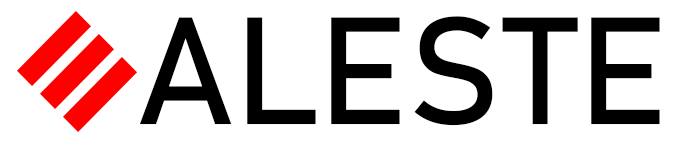
<style>
.page{position:relative;width:692px;height:149px;background:#ffffff}
.page>*{position:absolute;margin:0}
.t1{font:150px "Bahnschrift";color:#000000}
</style>
<div class="page">
<p class="t1" style="left:139px;top:16px;width:521px;height:110px">ALESTE</p>
</div>
